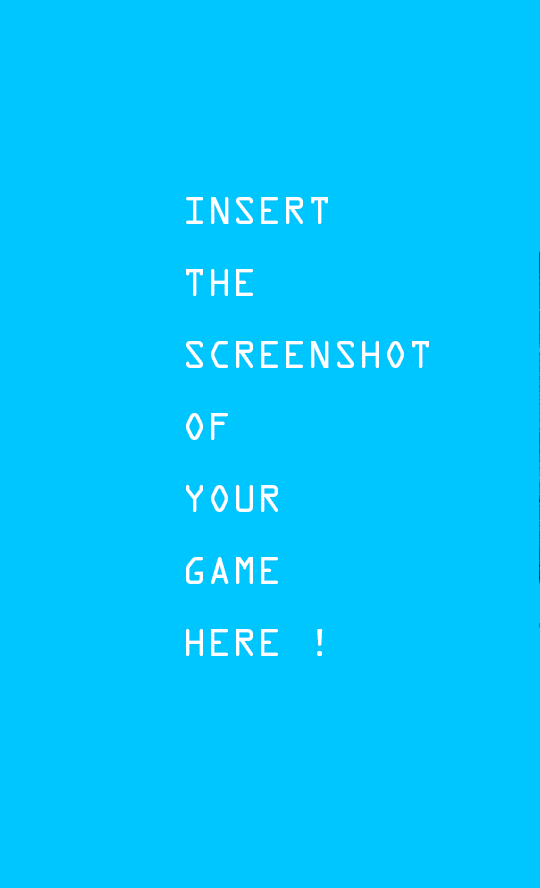
<style>
.page{position:relative;width:540px;height:888px;background:#00c6ff}
.page>*{position:absolute;margin:0}
.t1{font:60px "OCRAStd";color:#ffffff}
</style>
<div class="page">
<p class="t1" style="left:186px;top:197px;width:243px;height:459px">INSERT<br>THE<br>SCREENSHOT<br>OF<br>YOUR<br>GAME<br>HERE !</p>
</div>
